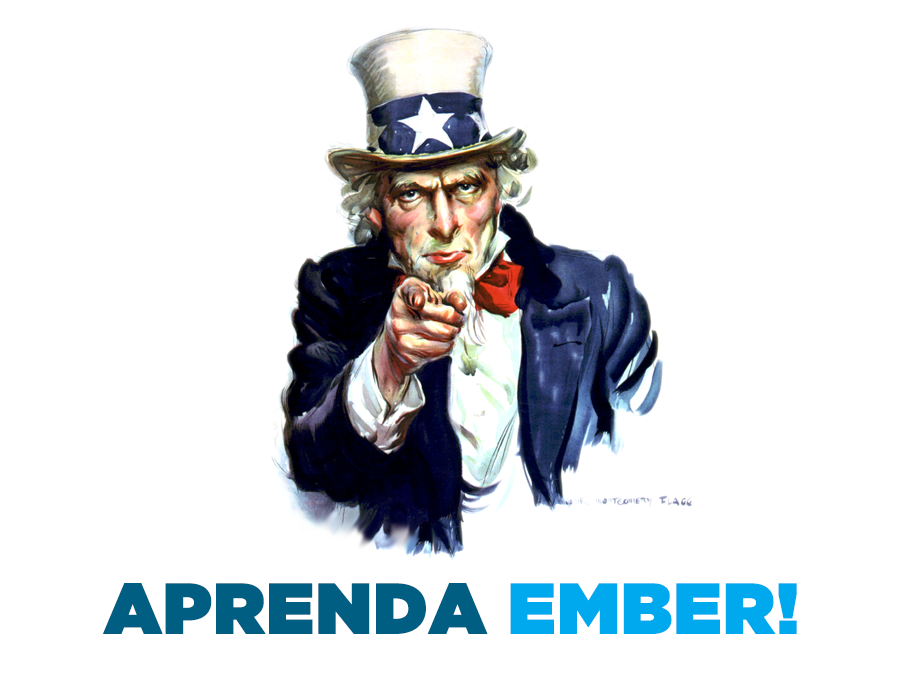
<style>
.page{position:relative;width:900px;height:700px;background:#ffffff}
.page>*{position:absolute;margin:0}
.t1{font:71.2px "GothamUltra";color:#005e83;font-weight:bold}
.t2{font:71.2px "GothamUltra";color:#00a9ee;font-weight:bold}
</style>
<div class="page">
<p class="t1" style="left:103px;top:583px;width:694px;height:51px">APRENDA <span class="t2">EMBER!</span></p>
</div>
